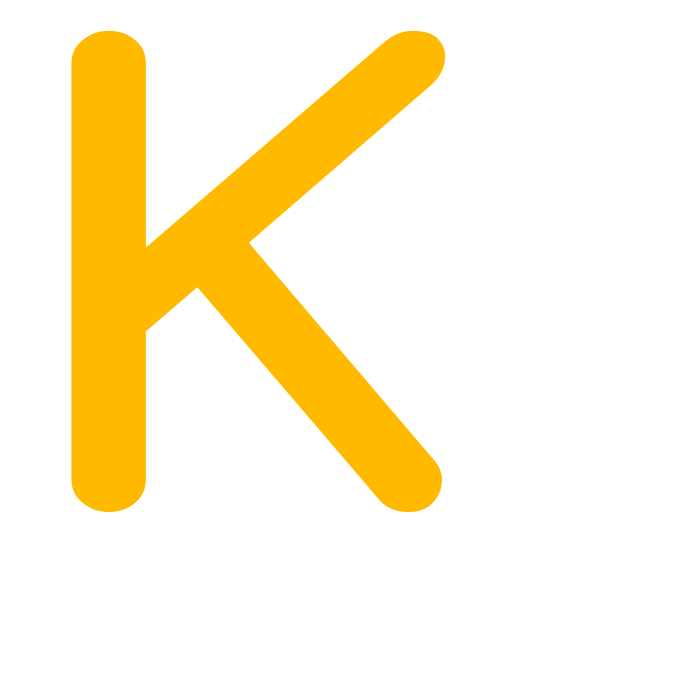
<style>
.page{position:relative;width:700px;height:700px;background:#ffffff}
.page>*{position:absolute;margin:0}
.t1{font:616.1px "Comfortaa-Bold";letter-spacing:0.1em;color:#ffba00;scale:1.16 1}
</style>
<div class="page">
<p class="t1" style="left:71px;top:30px;width:375px;height:482px">K</p>
</div>
